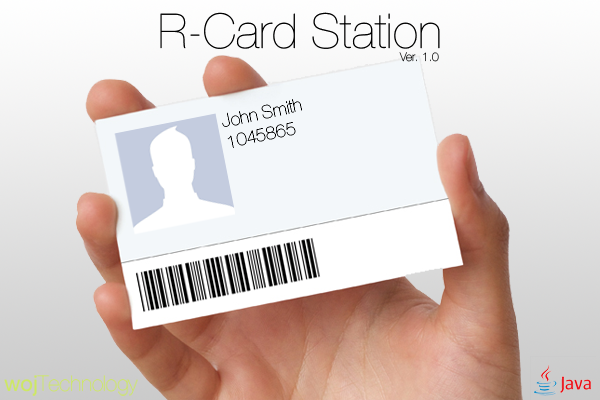
<style>
.page{position:relative;width:600px;height:400px}
.page>*{position:absolute;margin:0}
.t1{font:48px "HelveticaNeue-UltraLight";color:#000000}
.t2{font:12px "HelveticaNeue-UltraLight"}
.t3{font:18px "HelveticaNeue-UltraLight";color:#000000}
</style>
<div class="page">
<p class="t1" style="left:160px;top:12px;width:280px;height:37px">R-Card Station</p>
<p class="t2" style="left:399px;top:52px;width:40px;height:10px">Ver. 1.0</p>
<p class="t3" style="left:222px;top:99px;width:80px;height:49px;rotate:-12deg">John Smith<br>1045865</p>
</div>
